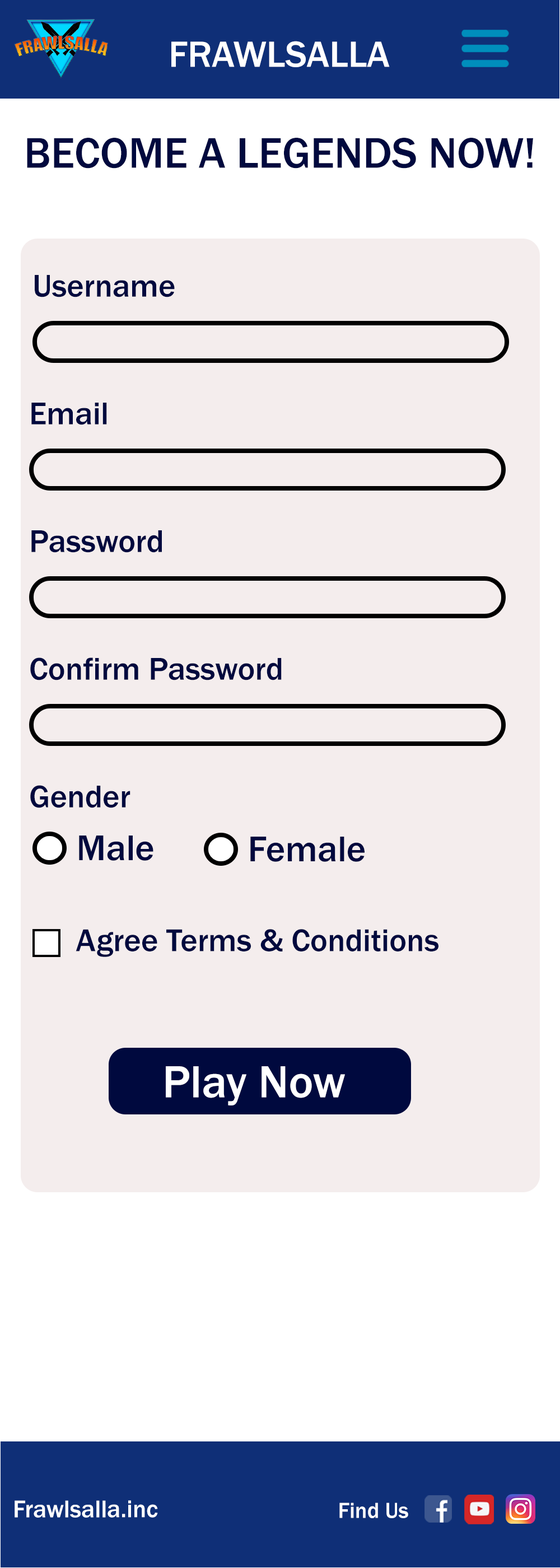
<style>
.page{position:relative;width:560px;height:1568px;background:#f4eded}
.page>*{position:absolute;margin:0}
.t1{font:37.7px "FranklinGothic-Medium";color:#ffffff}
.t2{font:44.2px "FranklinGothic-Medium";color:#00093e}
.t3{font:32.7px "FranklinGothic-Medium";color:#00093e}
.t4{font:37px "FranklinGothic-Medium";color:#00093e}
.t5{font:46.6px "FranklinGothic-Medium";color:#ffffff}
.t6{font:25px "FranklinGothic-Medium";color:#ffffff}
.t7{font:22.6px "FranklinGothic-Medium";color:#ffffff}
</style>
<div class="page">
<p class="t1" style="left:171px;top:41px;width:219px;height:26px">FRAWLSALLA</p>
<p class="t2" style="left:27px;top:138px;width:506px;height:31px">BECOME A LEGENDS NOW!</p>
<p class="t3" style="left:35px;top:275px;width:140px;height:22px">Username</p>
<p class="t3" style="left:31px;top:403px;width:76px;height:22px">Email</p>
<p class="t3" style="left:31px;top:530px;width:131px;height:23px">Password</p>
<p class="t3" style="left:30px;top:657px;width:252px;height:23px">Confirm Password</p>
<p class="t3" style="left:30px;top:785px;width:100px;height:23px">Gender</p>
<p class="t4" style="left:79px;top:836px;width:74px;height:25px">Male</p>
<p class="t4" style="left:250px;top:837px;width:115px;height:25px">Female</p>
<p class="t3" style="left:76px;top:929px;width:362px;height:28px">Agree Terms &amp; Conditions</p>
<p class="t5" style="left:166px;top:1066px;width:179px;height:39px">Play Now</p>
<p class="t6" style="left:15px;top:1500px;width:143px;height:18px">Frawlsalla.inc</p>
<p class="t7" style="left:339px;top:1502px;width:69px;height:16px">Find Us</p>
</div>
